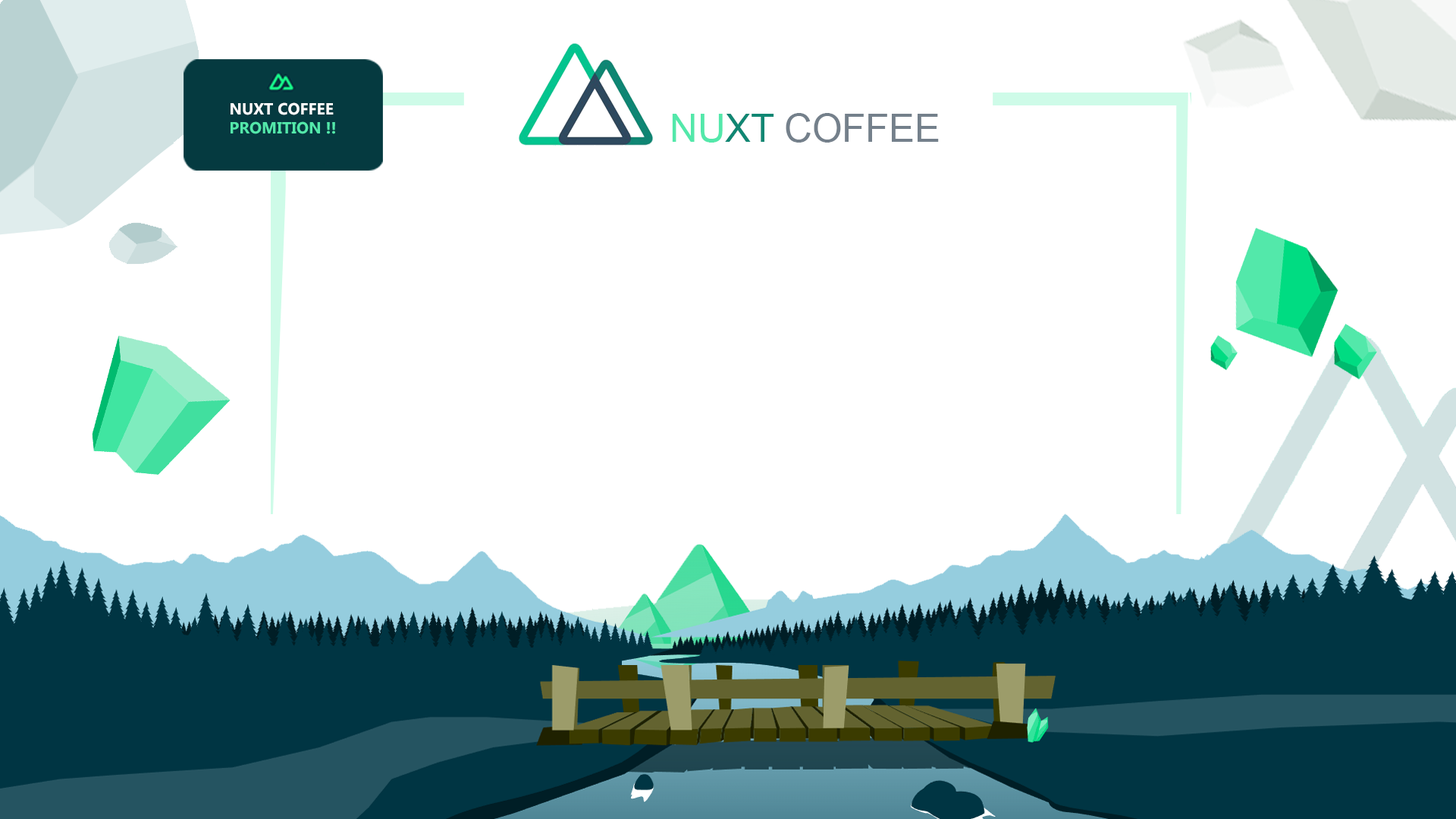
<style>
.page{position:relative;width:1456px;height:819px;background:#ffffff}
.page>*{position:absolute;margin:0}
.t1{font:16px "Gadugi-Bold";color:#53e8aa}
.t2{font:16px "Gadugi-Bold";color:#ffffff}
.t3{font:38.7px "ArialMT";color:#74808b}
.t4{font:38.7px "ArialMT";color:#53e8aa}
.t5{font:38.7px "ArialMT";color:#108773}
</style>
<div class="page">
<p class="t1" style="left:231px;top:102px;width:104px;height:32px"><span class="t2">NUXT COFFEE <br></span>PROMITION !!</p>
<p class="t3" style="left:672px;top:113px;width:267px;height:30px"><span class="t4">NU</span><span class="t5">XT </span>COFFEE</p>
</div>
